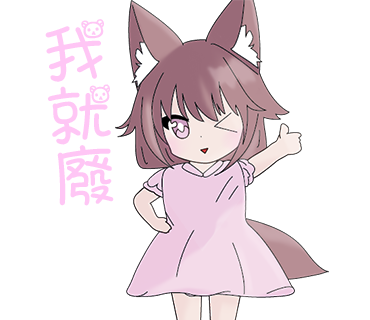
<style>
.page{position:relative;width:370px;height:320px;background:#ffffff}
.page>*{position:absolute;margin:0}
.t1{font:70.4px/62px "ARTianniuB5-Bold";letter-spacing:-0.04em;color:#ffc6f5}
</style>
<div class="page">
<p class="t1" style="left:45px;top:19px;width:69px;height:187px;rotate:-5deg">我<br>就<br>廢</p>
</div>
